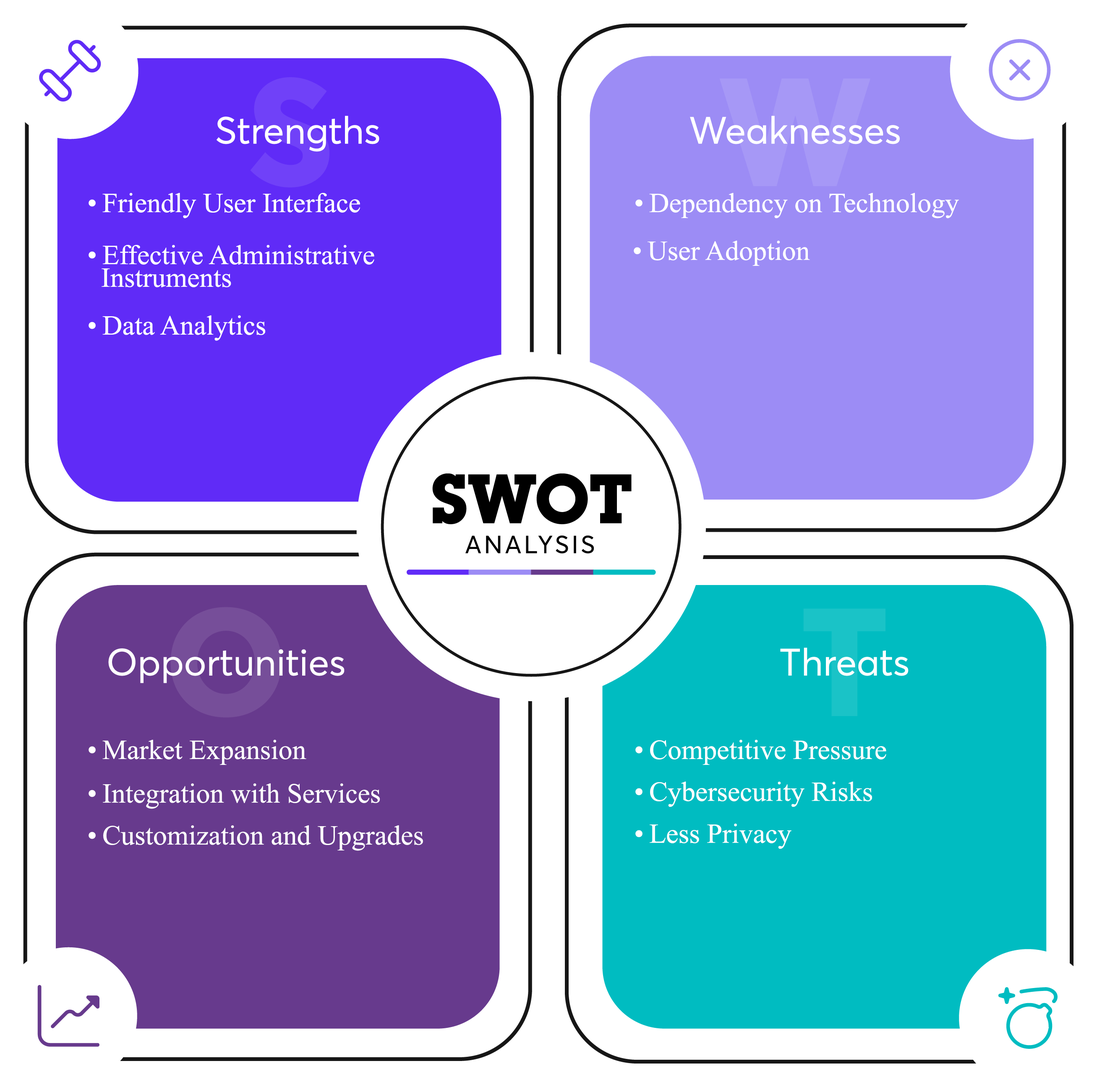
<style>
.page{position:relative;width:1097px;height:1087px;background:#ffffff}
.page>*{position:absolute;margin:0}
.t1{font:27.7px "TimesNewRomanPSMT";color:#ffffff}
.t2{font:27.7px/11.3px "TimesNewRomanPSMT";color:#ffffff}
</style>
<div class="page">
<p class="t1" style="left:89px;top:193px;width:271px;height:26px">• Friendly User Interface</p>
<p class="t1" style="left:635px;top:193px;width:324px;height:26px">• Dependency on Technology</p>
<p class="t2" style="left:89px;top:245px;width:285px;height:42px">• Effective Administrative <br><br>  Instruments</p>
<p class="t1" style="left:633px;top:240px;width:177px;height:26px">• User Adoption</p>
<p class="t1" style="left:89px;top:315px;width:176px;height:26px">• Data Analytics</p>
<p class="t1" style="left:89px;top:740px;width:217px;height:25px">• Market Expansion</p>
<p class="t1" style="left:635px;top:740px;width:251px;height:25px">• Competitive Pressure</p>
<p class="t1" style="left:89px;top:784px;width:291px;height:25px">• Integration with Services</p>
<p class="t1" style="left:635px;top:782px;width:237px;height:25px">• Cybersecurity Risks</p>
<p class="t1" style="left:89px;top:826px;width:334px;height:25px">• Customization and Upgrades</p>
<p class="t1" style="left:635px;top:824px;width:156px;height:25px">• Less Privacy</p>
</div>
